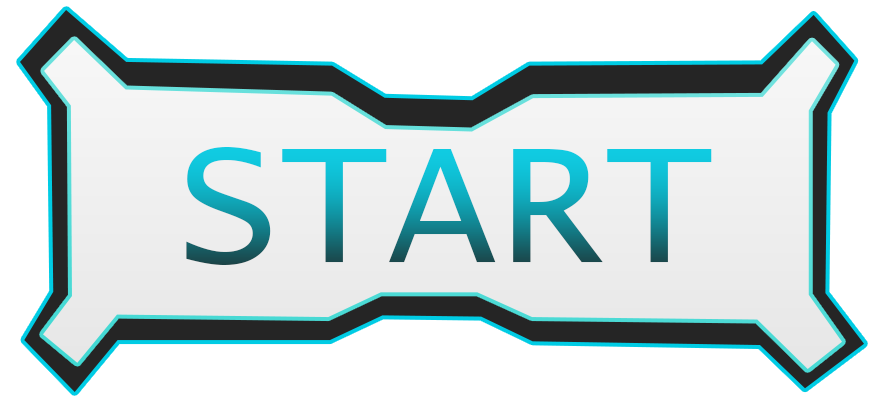
<style>
.page{position:relative;width:880px;height:400px;background:#ffffff}
.page>*{position:absolute;margin:0}
.t1{font:180px "LucidaConsole"}
</style>
<div class="page">
<p class="t1" style="left:186px;top:147px;width:526px;height:118px">START</p>
</div>
